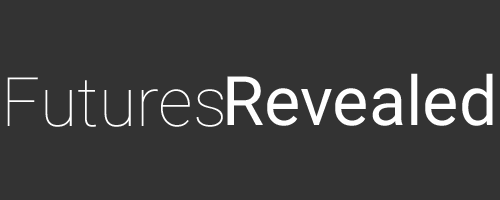
<style>
.page{position:relative;width:500px;height:200px;background:#333333}
.page>*{position:absolute;margin:0}
.t1{font:68.3px "Roboto-Thin";color:#ffffff}
.t2{font:68.3px "Roboto-Regular";color:#ffffff}
</style>
<div class="page">
<p class="t1" style="left:7px;top:77px;width:216px;height:50px">Futures</p>
<p class="t2" style="left:227px;top:73px;width:266px;height:53px">Revealed</p>
</div>
